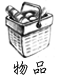
<style>
.page{position:relative;width:60px;height:80px;background:#ffffff}
.page>*{position:absolute;margin:0}
.t1{font:18px "STXingkaiSC-Light";letter-spacing:0.055em;color:#000000}
</style>
<div class="page">
<p class="t1" style="left:13px;top:60px;width:34px;height:15px">物品</p>
</div>
